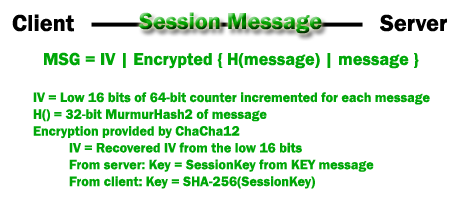
<style>
.page{position:relative;width:461px;height:201px;background:#ffffff}
.page>*{position:absolute;margin:0}
.t1{font:24px "FranklinGothic-Demi";color:#000000}
.t2{font:24px "FranklinGothic-Demi"}
.t3{font:18px "FranklinGothic-Demi";color:#00a708}
.t4{font:14px "FranklinGothic-Demi";color:#00a708}
</style>
<div class="page">
<p class="t1" style="left:12px;top:14px;width:62px;height:18px">Client</p>
<p class="t2" style="left:139px;top:12px;width:183px;height:22px">Session Message</p>
<p class="t1" style="left:380px;top:14px;width:67px;height:18px">Server</p>
<p class="t3" style="left:44px;top:52px;width:375px;height:17px">MSG = IV | Encrypted { H(message) | message }</p>
<p class="t4" style="left:33px;top:92px;width:397px;height:97px">IV = Low 16 bits of 64-bit counter incremented for each message<br>H() = 32-bit MurmurHash2 of message<br>Encryption provided by ChaCha12<br> IV = Recovered IV from the low 16 bits<br> From server: Key = SessionKey from KEY message<br> From client: Key = SHA-256(SessionKey)</p>
</div>
